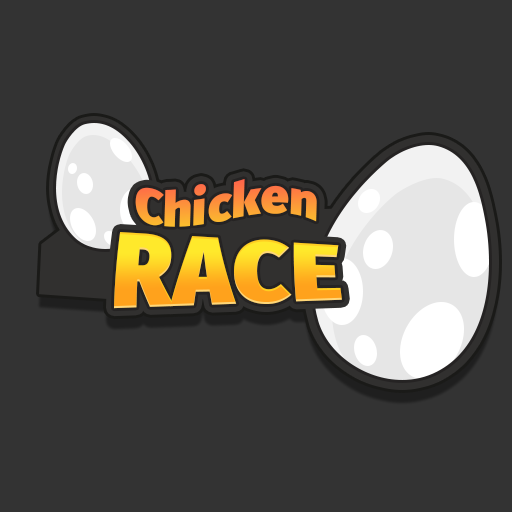
<style>
.page{position:relative;width:512px;height:512px;background:#333333}
.page>*{position:absolute;margin:0}
.t1{font:48.6px "FiraSans-Ultra";letter-spacing:0.025em}
.t2{font:77.8px "FiraSans-Ultra";letter-spacing:0.01em;scale:1.25 1}
</style>
<div class="page">
<p class="t1" style="left:135px;top:179px;width:182px;height:48px;rotate:2deg">Сhicken</p>
<p class="t2" style="left:114px;top:232px;width:228px;height:77px">RACE</p>
</div>
